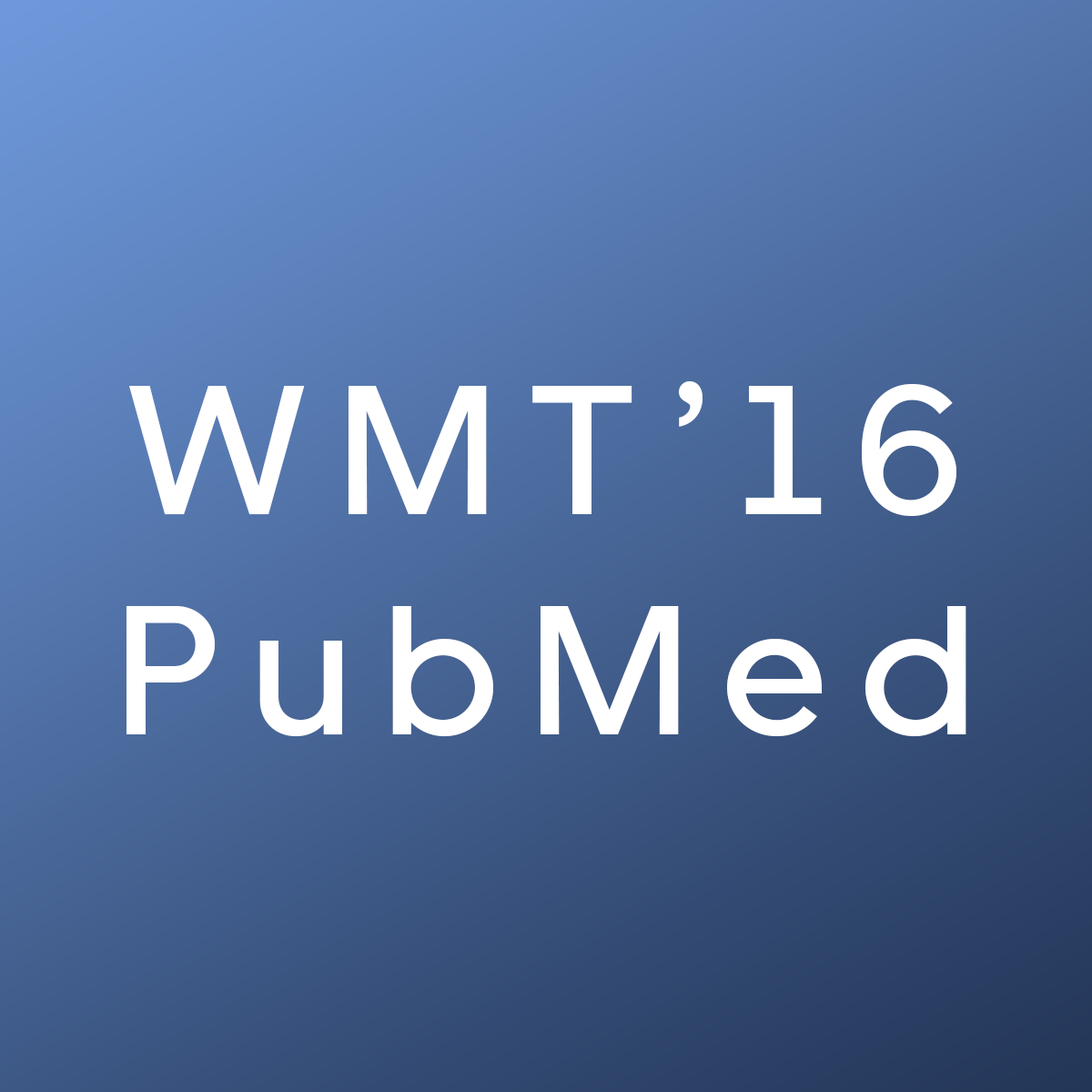
<style>
.page{position:relative;width:1092px;height:1092px}
.page>*{position:absolute;margin:0}
.t1{font:182.9px "UberMove-Medium";letter-spacing:0.18em;color:#ffffff}
</style>
<div class="page">
<p class="t1" style="left:126px;top:381px;width:840px;height:356px;text-align:center">WMT’16<br>PubMed</p>
</div>
